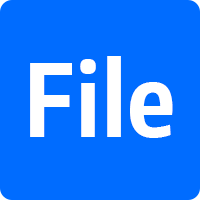
<style>
.page{position:relative;width:200px;height:200px;background:#006cff}
.page>*{position:absolute;margin:0}
.t1{font:100px "EncodeSansCompressed-Bold";letter-spacing:0.015em;color:#ffffff}
</style>
<div class="page">
<p class="t1" style="left:30px;top:56px;width:143px;height:82px">File</p>
</div>
